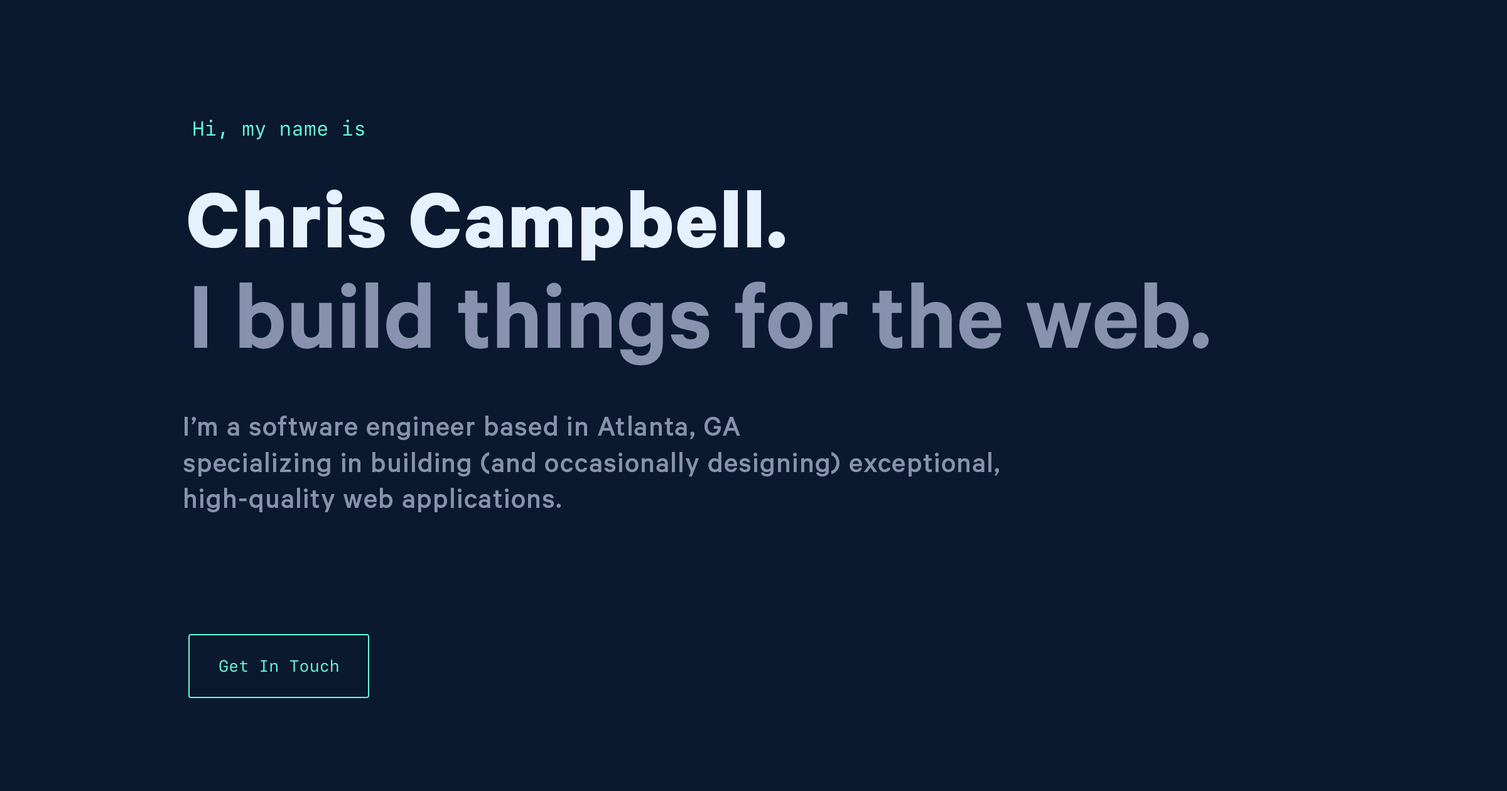
<style>
.page{position:relative;width:1507px;height:791px;background:#0a192f}
.page>*{position:absolute;margin:0}
.t1{font:87.9px "Calibre-Bold";letter-spacing:0.025em;color:#e6f1ff}
.t2{font:30.1px "Calibre-Medium";letter-spacing:0.025em;color:#8892af}
</style>
<div class="page">
<p class="t1" style="left:188px;top:189px;width:597px;height:72px">Chris Campbell.</p>
<p class="t2" style="left:183px;top:416px;width:816px;height:96px">I’m a software engineer based in Atlanta, GA<br>specializing in building (and occasionally designing) exceptional,<br>high-quality web applications.</p>
</div>
